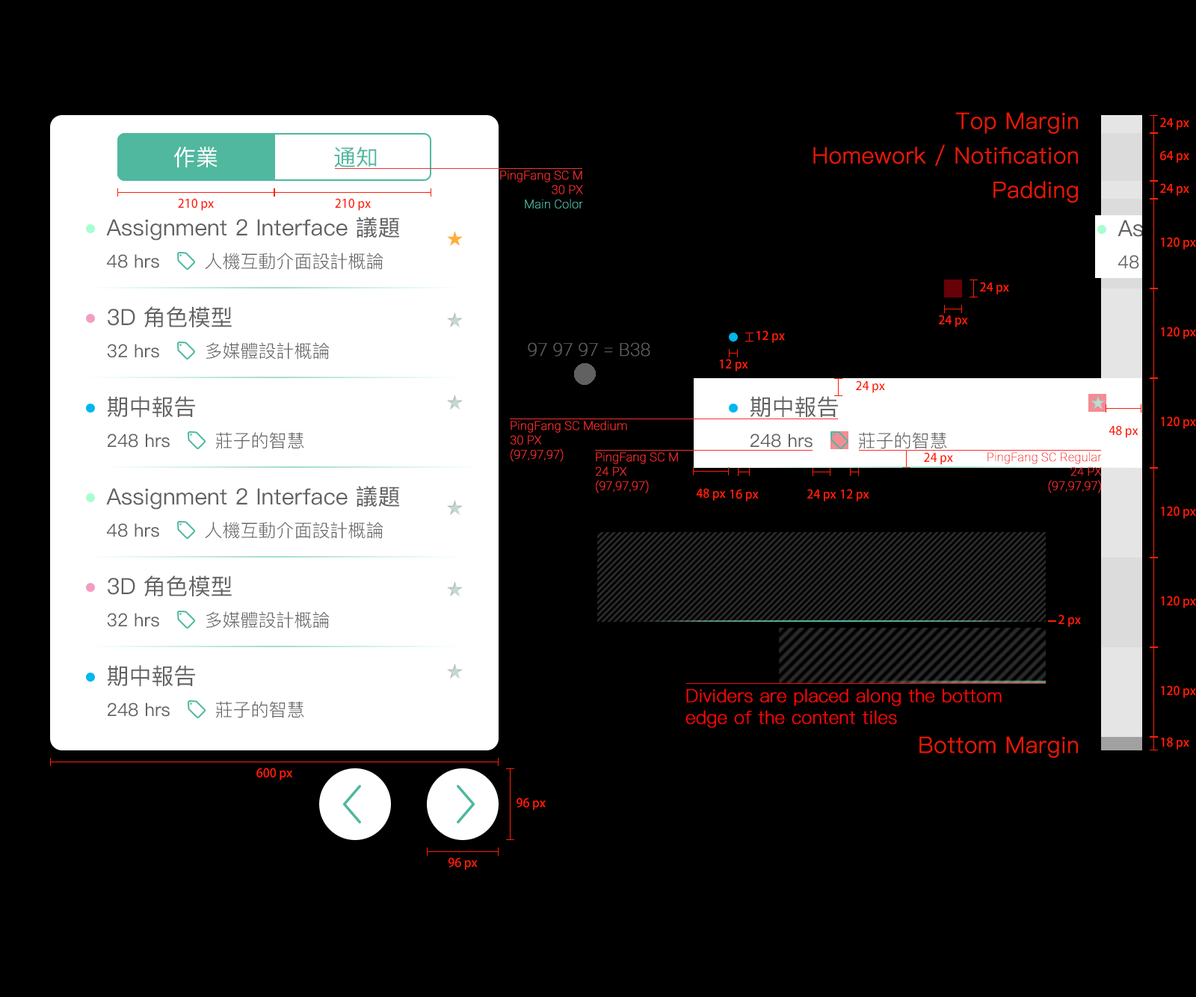
<style>
.page{position:relative;width:1196px;height:997px;background:#000000}
.page>*{position:absolute;margin:0}
.t1{font:22.4px "PingFang-SC-Regular";color:#e31906;font-weight:bold}
.t2{font:12px "AdobeFanHeitiStd-Bold";color:#ff1e07}
.t3{font:22.4px "PingFang-SC-Medium";color:#ffffff}
.t4{font:22.4px "PingFang-SC-Medium";color:#4fb89f}
.t5{font:12px "Roboto-Thin";color:#f83030;font-weight:bold}
.t6{font:12px "Roboto-Thin";color:#4fb89f;font-weight:bold}
.t7{font:22.4px "PingFang-SC-Medium";color:#616161}
.t8{font:17.9px "PingFang-SC-Medium";color:#616161}
.t9{font:17.9px "PingFang-SC-Regular";color:#616161}
.t10{font:17.9px "Roboto-Thin";color:#616161;font-weight:bold}
.t11{font:17.9px "PingFang-SC-Light";color:#ff0707;font-weight:bold}
</style>
<div class="page">
<p class="t1" style="left:955px;top:112px;width:123px;height:22px">Top Margin</p>
<p class="t2" style="left:1160px;top:117px;width:29px;height:13px">24 px</p>
<p class="t3" style="left:174px;top:146px;width:44px;height:21px">作業</p>
<p class="t4" style="left:334px;top:146px;width:43px;height:21px">通知</p>
<p class="t1" style="left:813px;top:144px;width:265px;height:22px">Homework / Notification</p>
<p class="t2" style="left:1160px;top:150px;width:29px;height:13px">64 px</p>
<p class="t5" style="left:500px;top:170px;width:83px;height:39px;text-align:right">PingFang SC M<br>30 PX<br><span class="t6">Main Color</span></p>
<p class="t1" style="left:993px;top:181px;width:85px;height:22px">Padding</p>
<p class="t2" style="left:1160px;top:183px;width:29px;height:13px">24 px</p>
<p class="t2" style="left:178px;top:198px;width:36px;height:13px">210 px</p>
<p class="t2" style="left:335px;top:198px;width:36px;height:13px">210 px</p>
<p class="t7" style="left:106px;top:217px;width:293px;height:24px">Assignment 2 Interface 議題</p>
<p class="t2" style="left:1161px;top:237px;width:35px;height:13px">120 px</p>
<p class="t8" style="left:107px;top:254px;width:52px;height:14px">48 hrs</p>
<p class="t9" style="left:205px;top:253px;width:178px;height:17px">人機互動介面設計概論</p>
<p class="t2" style="left:980px;top:282px;width:29px;height:12px">24 px</p>
<p class="t7" style="left:108px;top:306px;width:124px;height:21px">3D 角色模型</p>
<p class="t2" style="left:939px;top:315px;width:29px;height:12px">24 px</p>
<p class="t2" style="left:1161px;top:327px;width:35px;height:12px">120 px</p>
<p class="t2" style="left:756px;top:330px;width:29px;height:13px">12 px</p>
<p class="t8" style="left:107px;top:344px;width:52px;height:14px">32 hrs</p>
<p class="t9" style="left:206px;top:342px;width:124px;height:18px">多媒體設計概論</p>
<p class="t10" style="left:528px;top:342px;width:122px;height:15px">97 97 97 = B38</p>
<p class="t2" style="left:719px;top:359px;width:29px;height:12px">12 px</p>
<p class="t2" style="left:856px;top:380px;width:29px;height:13px">24 px</p>
<p class="t7" style="left:108px;top:396px;width:87px;height:22px">期中報告</p>
<p class="t7" style="left:750px;top:396px;width:88px;height:22px">期中報告</p>
<p class="t5" style="left:510px;top:421px;width:117px;height:41px">PingFang SC Medium<br>30 PX<br>(97,97,97)</p>
<p class="t2" style="left:1108px;top:425px;width:30px;height:13px">48 px</p>
<p class="t2" style="left:1161px;top:416px;width:35px;height:13px">120 px</p>
<p class="t8" style="left:108px;top:434px;width:62px;height:14px">248 hrs</p>
<p class="t9" style="left:215px;top:432px;width:89px;height:17px">莊子的智慧</p>
<p class="t8" style="left:750px;top:434px;width:62px;height:14px">248 hrs</p>
<p class="t9" style="left:858px;top:432px;width:89px;height:17px">莊子的智慧</p>
<p class="t5" style="left:596px;top:452px;width:82px;height:41px">PingFang SC M<br>24 PX<br>(97,97,97)</p>
<p class="t2" style="left:924px;top:452px;width:29px;height:13px">24 px</p>
<p class="t5" style="left:987px;top:452px;width:115px;height:41px;text-align:right">PingFang SC Regular<br>24 PX<br>(97,97,97)</p>
<p class="t7" style="left:106px;top:486px;width:293px;height:24px">Assignment 2 Interface 議題</p>
<p class="t2" style="left:696px;top:488px;width:30px;height:13px">48 px</p>
<p class="t2" style="left:730px;top:489px;width:29px;height:13px">16 px</p>
<p class="t2" style="left:807px;top:489px;width:29px;height:13px">24 px</p>
<p class="t2" style="left:840px;top:489px;width:29px;height:13px">12 px</p>
<p class="t2" style="left:1161px;top:506px;width:35px;height:13px">120 px</p>
<p class="t9" style="left:205px;top:522px;width:178px;height:17px">人機互動介面設計概論</p>
<p class="t8" style="left:107px;top:523px;width:52px;height:14px">48 hrs</p>
<p class="t7" style="left:108px;top:576px;width:124px;height:20px">3D 角色模型</p>
<p class="t2" style="left:1161px;top:596px;width:35px;height:12px">120 px</p>
<p class="t8" style="left:107px;top:613px;width:52px;height:14px">32 hrs</p>
<p class="t9" style="left:206px;top:611px;width:124px;height:18px">多媒體設計概論</p>
<p class="t2" style="left:1058px;top:614px;width:23px;height:13px">2 px</p>
<p class="t7" style="left:108px;top:665px;width:87px;height:22px">期中報告</p>
<p class="t11" style="left:685px;top:688px;width:317px;height:40px">Dividers are placed along the bottom<br>edge of the content tiles</p>
<p class="t2" style="left:1161px;top:685px;width:35px;height:13px">120 px</p>
<p class="t9" style="left:215px;top:701px;width:89px;height:17px">莊子的智慧</p>
<p class="t8" style="left:108px;top:703px;width:62px;height:14px">248 hrs</p>
<p class="t1" style="left:919px;top:736px;width:159px;height:22px">Bottom Margin</p>
<p class="t2" style="left:1161px;top:737px;width:28px;height:13px">18 px</p>
<p class="t2" style="left:256px;top:768px;width:36px;height:12px">600 px</p>
<p class="t2" style="left:516px;top:798px;width:30px;height:12px">96 px</p>
<p class="t2" style="left:448px;top:857px;width:30px;height:13px">96 px</p>
</div>
